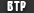
<style>
.page{position:relative;width:34px;height:13px;background:#333333}
.page>*{position:absolute;margin:0}
.t1{font:13.9px "NK_04";color:#ffffff}
</style>
<div class="page">
<p class="t1" style="left:7px;top:1px;width:19px;height:10px">ВТР</p>
</div>
